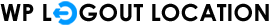
<style>
.page{position:relative;width:270px;height:26px;background:#ffffff}
.page>*{position:absolute;margin:0}
.t1{font:23.8px "CenturyGothic-Bold";color:#030303}
</style>
<div class="page">
<p class="t1" style="left:0px;top:3px;width:269px;height:19px">WP L    GOUT LOCATION</p>
</div>
